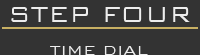
<style>
.page{position:relative;width:200px;height:55px;background:#333333}
.page>*{position:absolute;margin:0}
.t1{font:29px "BankGothicBT-Light";color:#ededed}
.t2{font:17.7px "BankGothicBT-Light";color:#ededed}
</style>
<div class="page">
<p class="t1" style="left:11px;top:7px;width:179px;height:15px">STEP FOUR</p>
<p class="t2" style="left:50px;top:46px;width:98px;height:9px">TIME DIAL</p>
</div>
